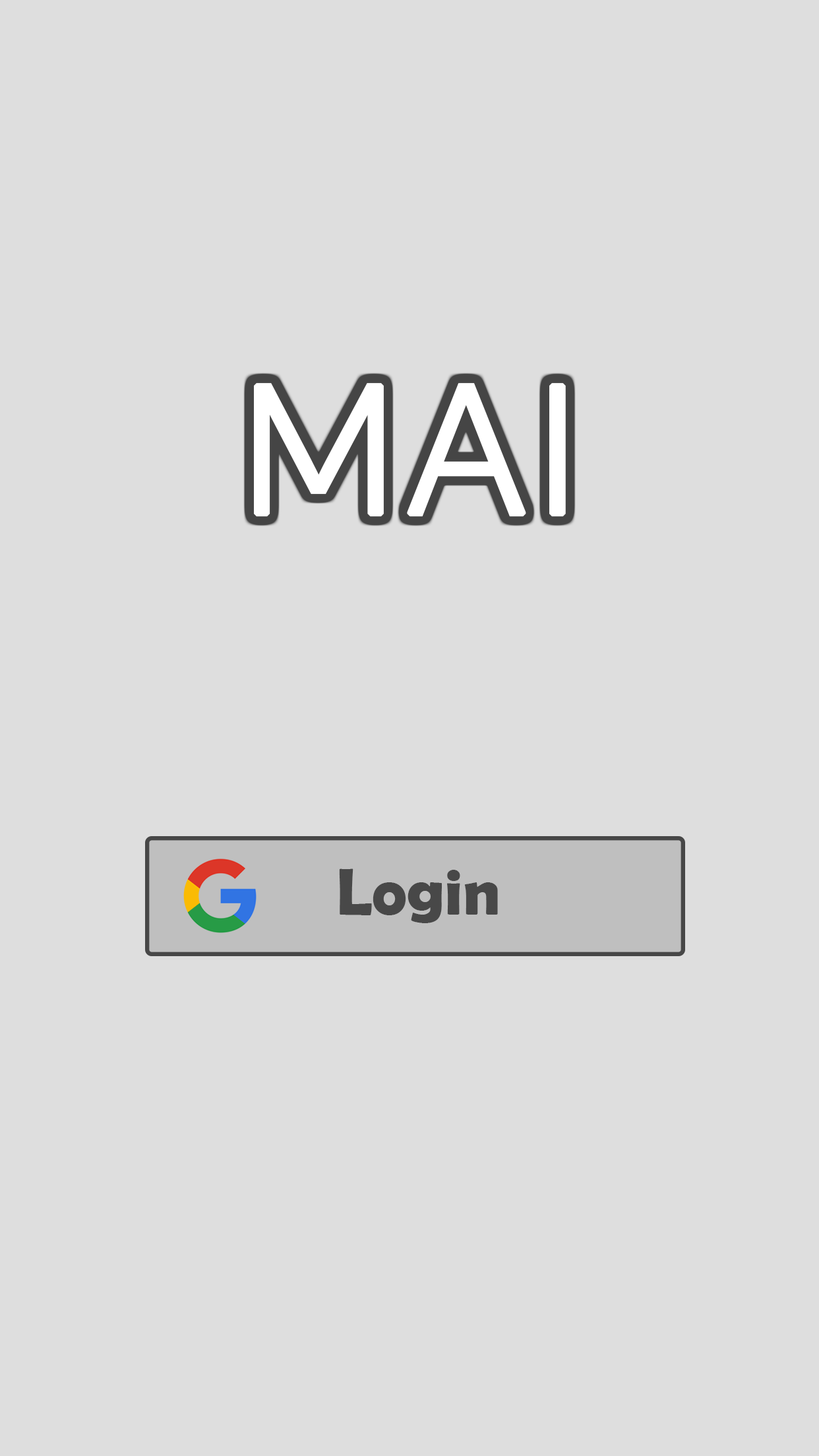
<style>
.page{position:relative;width:819px;height:1456px;background:#dedede}
.page>*{position:absolute;margin:0}
.t1{font:197.8px "Dubai-Light";color:#ffffff;font-weight:bold}
.t2{font:65.9px "BerlinSansFBDemi-Bold";color:#484848}
</style>
<div class="page">
<p class="t1" style="left:254px;top:382px;width:312px;height:135px">MAI</p>
<p class="t2" style="left:339px;top:868px;width:159px;height:55px">Login</p>
</div>
